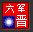
<style>
.page{position:relative;width:33px;height:32px;background:#f20000}
.page>*{position:absolute;margin:0}
.t1{font:10.4px "SimSun";color:#ffffff}
.t2{font:11.7px "SimSun";color:#ffffff}
</style>
<div class="page">
<p class="t1" style="left:5px;top:4px;width:20px;height:9px">六军</p>
<p class="t2" style="left:16px;top:15px;width:11px;height:12px">晋</p>
</div>
